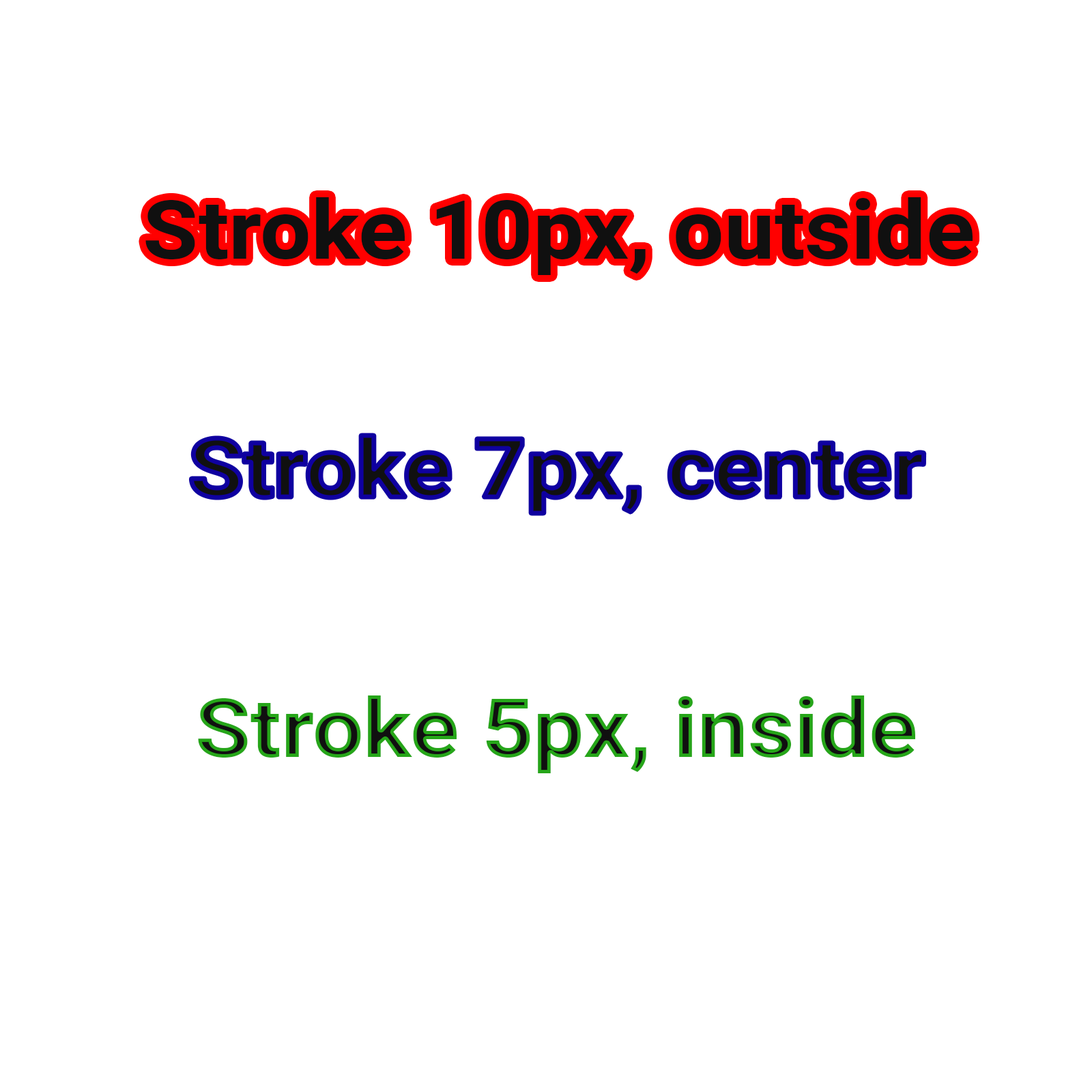
<style>
.page{position:relative;width:1092px;height:1092px;background:#ffffff}
.page>*{position:absolute;margin:0}
.t1{font:81.9px "Roboto-Bold";color:#101010;scale:1.1 1}
.t2{font:81.9px "Roboto-Bold";scale:1.1 1}
</style>
<div class="page">
<p class="t1" style="left:145px;top:197px;width:828px;height:78px">Stroke 10px, outside</p>
<p class="t2" style="left:191px;top:435px;width:733px;height:78px">Stroke 7px, center</p>
<p class="t2" style="left:198px;top:695px;width:717px;height:78px">Stroke 5px, inside</p>
</div>
